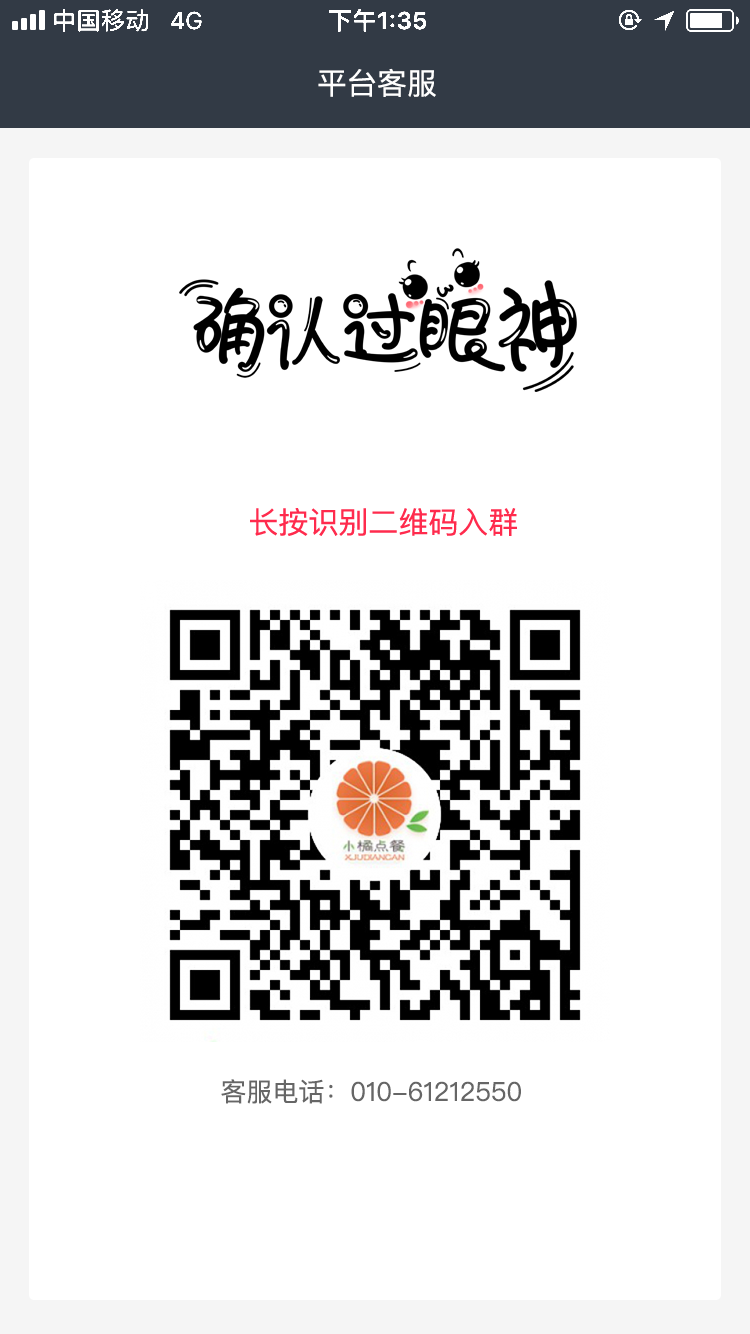
<style>
.page{position:relative;width:750px;height:1334px;background:#ffffff}
.page>*{position:absolute;margin:0}
.t1{font:30px "PingFangSC-Regular";color:#ffffff}
.t2{font:30px "PingFang-SC-Medium";color:#ff2b4d}
.t3{font:26px "PingFangSC-Regular";color:#666666}
</style>
<div class="page">
<p class="t1" style="left:318px;top:68px;width:118px;height:29px">平台客服</p>
<p class="t2" style="left:250px;top:508px;width:267px;height:28px">长按识别二维码入群</p>
<p class="t3" style="left:221px;top:1079px;width:300px;height:25px">客服电话：010-61212550</p>
</div>
